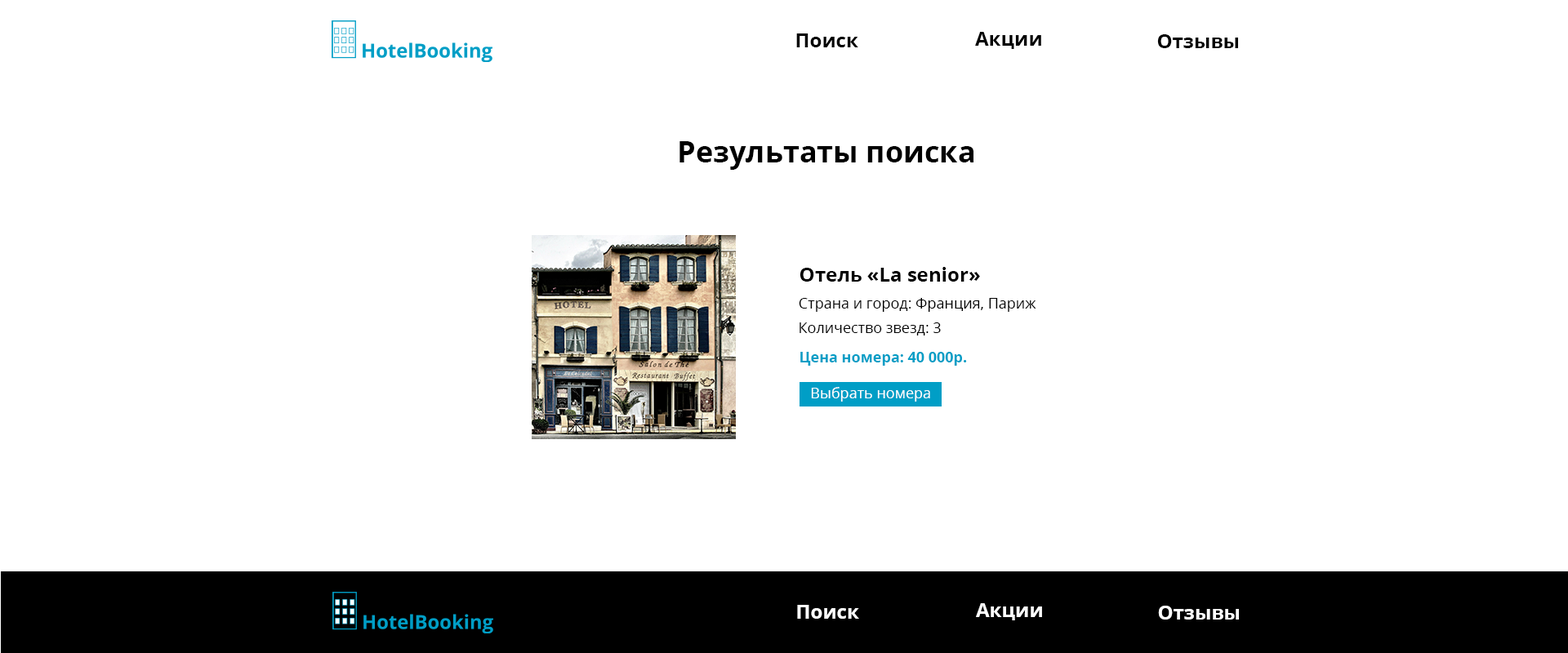
<style>
.page{position:relative;width:1568px;height:653px;background:#ffffff}
.page>*{position:absolute;margin:0}
.t1{font:19.6px "OpenSans-Bold";color:#000000}
.t2{font:29.4px "OpenSans-Bold";color:#000000}
.t3{font:14.7px "OpenSans-Regular";color:#000000}
.t4{font:14.7px "OpenSans-Bold";color:#009ec6}
.t5{font:14.7px "OpenSans-Regular";color:#ffffff}
.t6{font:19.6px "OpenSans-Bold";color:#ffffff}
</style>
<div class="page">
<p class="t1" style="left:796px;top:33px;width:62px;height:14px">Поиск</p>
<p class="t1" style="left:975px;top:32px;width:66px;height:17px">Акции</p>
<p class="t1" style="left:1157px;top:34px;width:81px;height:14px">Отзывы</p>
<p class="t2" style="left:679px;top:141px;width:294px;height:29px">Результаты поиска</p>
<p class="t1" style="left:800px;top:267px;width:180px;height:15px">Отель «La senior»</p>
<p class="t3" style="left:799px;top:298px;width:237px;height:14px">Страна и город: Франция, Париж</p>
<p class="t3" style="left:800px;top:323px;width:141px;height:13px">Количество звезд: 3</p>
<p class="t4" style="left:800px;top:352px;width:167px;height:14px">Цена номера: 40 000р.</p>
<p class="t5" style="left:811px;top:387px;width:119px;height:15px">Выбрать номера</p>
<p class="t6" style="left:797px;top:605px;width:62px;height:14px">Поиск</p>
<p class="t6" style="left:976px;top:604px;width:66px;height:17px">Акции</p>
<p class="t6" style="left:1158px;top:606px;width:81px;height:14px">Отзывы</p>
</div>
